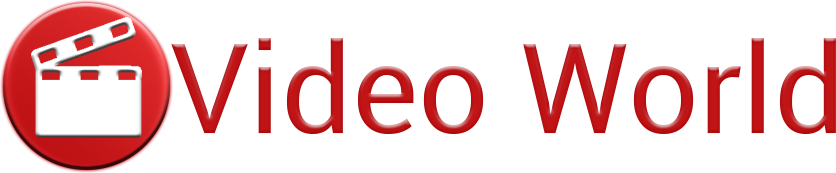
<style>
.page{position:relative;width:836px;height:173px;background:#ffffff}
.page>*{position:absolute;margin:0}
.t1{font:125px "Roboto-Regular";color:#c01417}
</style>
<div class="page">
<p class="t1" style="left:171px;top:38px;width:665px;height:96px">Video World</p>
</div>
